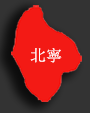
<style>
.page{position:relative;width:90px;height:113px;background:#333333}
.page>*{position:absolute;margin:0}
.t1{font:16px "SimSun";color:#ffffff}
</style>
<div class="page">
<p class="t1" style="left:30px;top:48px;width:32px;height:15px">北寧</p>
</div>
